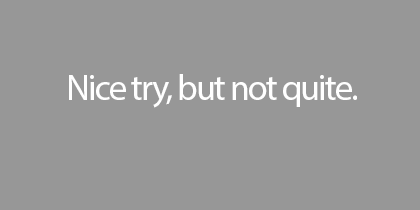
<style>
.page{position:relative;width:420px;height:210px;background:#979797}
.page>*{position:absolute;margin:0}
.t1{font:36px "MyriadPro-Regular";letter-spacing:-0.05em;color:#ffffff}
</style>
<div class="page">
<p class="t1" style="left:69px;top:74px;width:288px;height:34px">Nice try, but not quite.</p>
</div>
